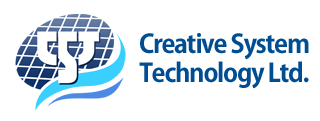
<style>
.page{position:relative;width:320px;height:121px;background:#ffffff}
.page>*{position:absolute;margin:0}
.t1{font:25.5px/28.3px "KozGoPr6N-Bold";letter-spacing:-0.05em;color:#004e91}
</style>
<div class="page">
<p class="t1" style="left:139px;top:33px;width:170px;height:56px">Creative System <br>Technology Ltd.</p>
</div>
